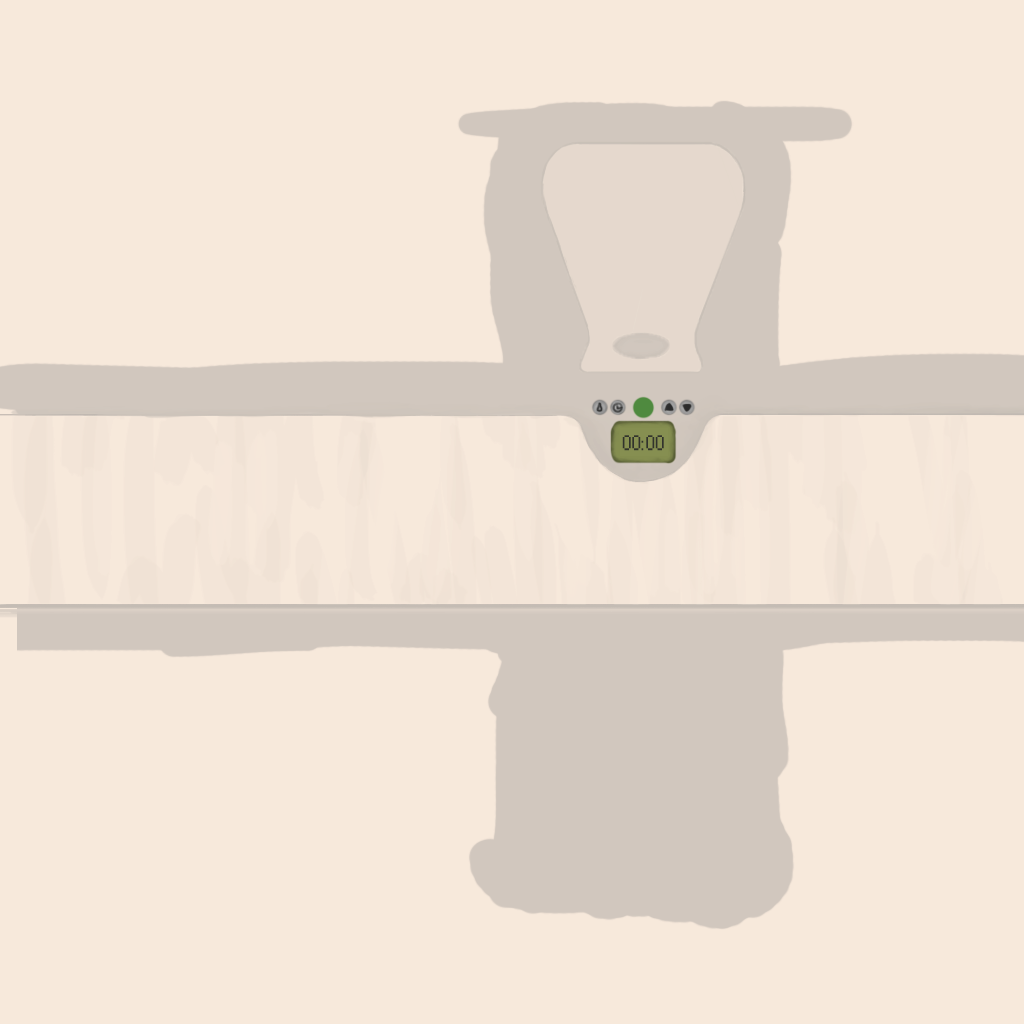
<style>
.page{position:relative;width:1024px;height:1024px;background:#f7e9db}
.page>*{position:absolute;margin:0}
.t1{font:20px "Small Fonts";color:#32332d}
</style>
<div class="page">
<p class="t1" style="left:622px;top:435px;width:42px;height:16px">00:00</p>
</div>
